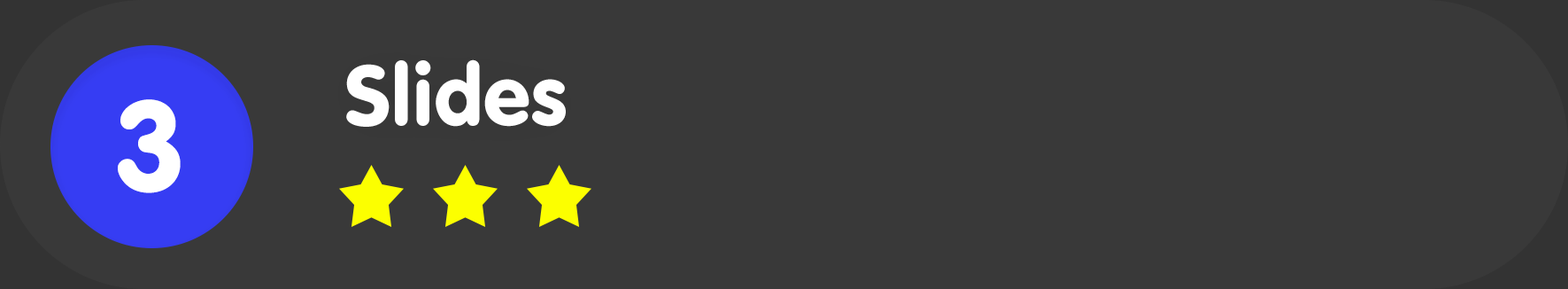
<style>
.page{position:relative;width:1568px;height:289px;background:#393939}
.page>*{position:absolute;margin:0}
.t1{font:88.5px "VAGRundschriftD";color:#ffffff}
.t2{font:132.8px "VAGRundschriftD";color:#ffffff}
</style>
<div class="page">
<p class="t1" style="left:346px;top:59px;width:220px;height:68px">Slides</p>
<p class="t2" style="left:118px;top:99px;width:63px;height:94px">3</p>
</div>
